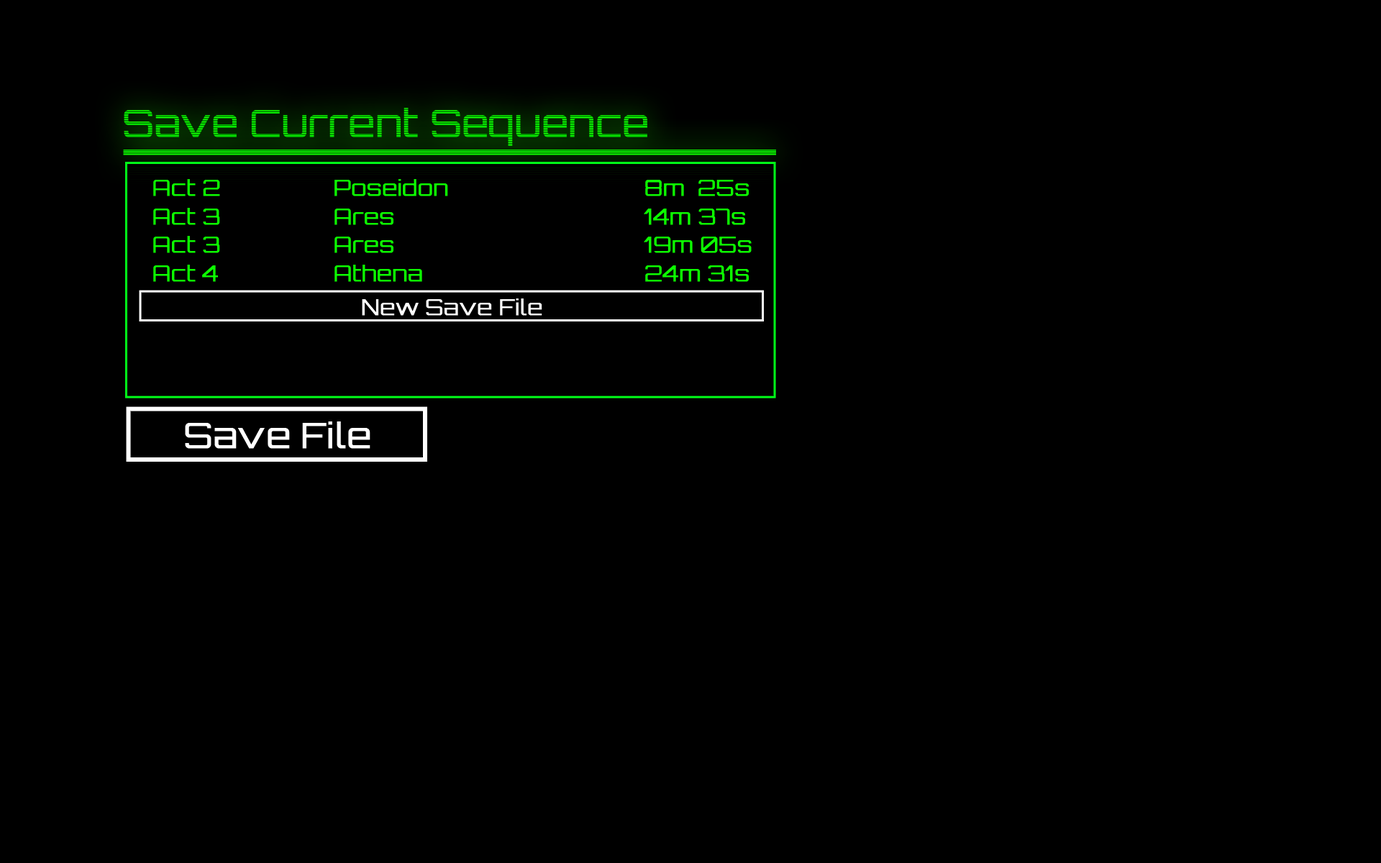
<style>
.page{position:relative;width:1381px;height:863px;background:#000000}
.page>*{position:absolute;margin:0}
.t1{font:37.4px "Orbitron-Light";font-weight:bold}
.t2{font:21.6px "Orbitron-Light";color:#0cff00;font-weight:bold}
.t3{font:21.6px "Orbitron-Light";color:#ffffff;font-weight:bold}
.t4{font:34.5px "Orbitron-Light";color:#ffffff;font-weight:bold}
</style>
<div class="page">
<p class="t1" style="left:124px;top:108px;width:523px;height:38px">Save Current Sequence</p>
<p class="t2" style="left:153px;top:179px;width:596px;height:17px">Act 2     Poseidon        8m  25s</p>
<p class="t2" style="left:153px;top:208px;width:592px;height:17px">Act 3     Ares            14m 37s</p>
<p class="t2" style="left:153px;top:236px;width:599px;height:17px">Act 3     Ares            19m 05s</p>
<p class="t2" style="left:153px;top:265px;width:596px;height:17px">Act 4     Athena           24m 31s</p>
<p class="t3" style="left:362px;top:299px;width:180px;height:17px">New Save File</p>
<p class="t4" style="left:185px;top:422px;width:185px;height:27px">Save File</p>
</div>
